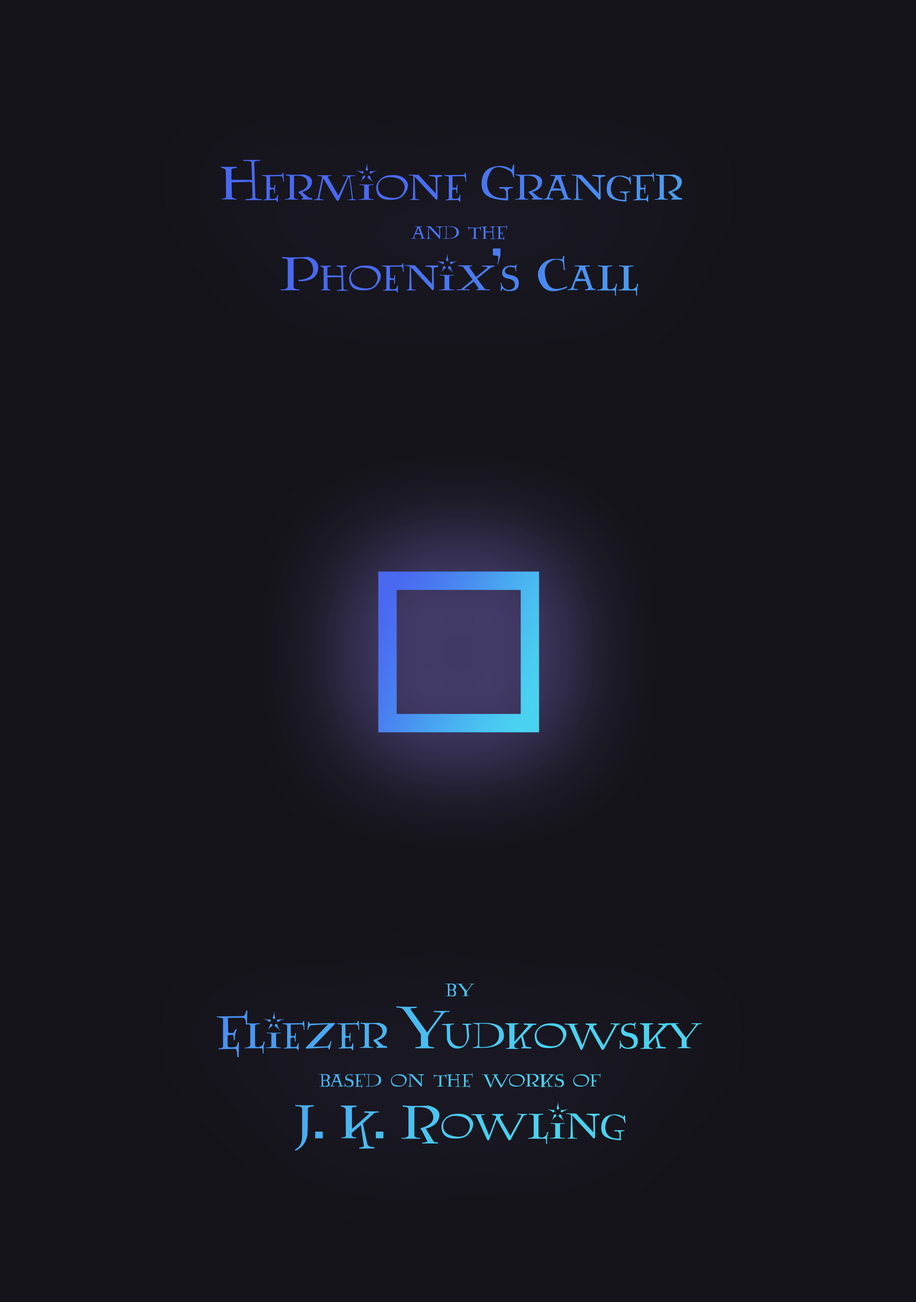
<style>
.page{position:relative;width:916px;height:1302px;background:#141319}
.page>*{position:absolute;margin:0}
.t1{font:55.1px/51.5px "Lumos";color:#4975f0}
.t2{font:27.6px/38.9px "Lumos";color:#4975f0}
.t3{font:27.6px/38.9px "Lumos";color:#49c3f0}
.t4{font:27.6px/706.4px "Lumos";color:#49c3f0}
.t5{font:55.1px/51.5px "Lumos";color:#49c3f0}
</style>
<div class="page">
<p class="t1" style="left:220px;top:160px;width:462px;height:136px;text-align:center">Hermione Granger <br><span class="t2">and the<br></span>Phoenix's Call</p>
<p class="t3" style="left:216px;top:983px;width:486px;height:168px;text-align:center"><span class="t4">by<br></span><span class="t5">Eliezer Yudkowsky<br></span>based on the works of<br><span class="t5">J. K. Rowling</span></p>
</div>
